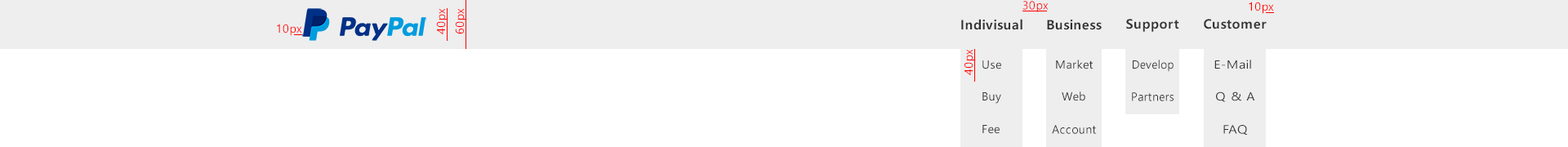
<style>
.page{position:relative;width:1568px;height:147px;background:#ffffff}
.page>*{position:absolute;margin:0}
.t1{font:11.4px "MalgunGothic";letter-spacing:0.03em;color:#ff0000}
.t2{font:13.1px "MalgunGothicBold";letter-spacing:0.03em;color:#333333}
.t3{font:11.4px "MalgunGothic";letter-spacing:0.03em;color:#333333}
.t4{font:11.4px "MalgunGothic";letter-spacing:0.03em;color:#333333;scale:1.13 1}
.t5{font:11.6px "MalgunGothic";letter-spacing:0.03em;color:#333333;scale:0.96 1}
.t6{font:11.6px "MalgunGothic";letter-spacing:0.03em;color:#333333}
.t7{font:11.6px "MalgunGothic";letter-spacing:0.03em;color:#333333;scale:1.12 1}
</style>
<div class="page">
<p class="t1" style="left:1022px;top:1px;width:27px;height:11px">30px</p>
<p class="t1" style="left:1249px;top:2px;width:25px;height:12px">10px</p>
<p class="t1" style="left:436px;top:8px;width:12px;height:26px;rotate:-90deg">40px</p>
<p class="t1" style="left:455px;top:8px;width:12px;height:26px;rotate:-90deg">60px</p>
<p class="t1" style="left:277px;top:24px;width:25px;height:12px">10px</p>
<p class="t2" style="left:961px;top:19px;width:61px;height:11px">Indivisual</p>
<p class="t2" style="left:1047px;top:20px;width:55px;height:10px">Business</p>
<p class="t2" style="left:1126px;top:19px;width:53px;height:13px">Support</p>
<p class="t2" style="left:1204px;top:19px;width:63px;height:10px">Customer</p>
<p class="t1" style="left:964px;top:49px;width:12px;height:26px;rotate:-90deg">40px</p>
<p class="t3" style="left:982px;top:60px;width:19px;height:9px">Use</p>
<p class="t3" style="left:1056px;top:60px;width:37px;height:9px">Market</p>
<p class="t3" style="left:1133px;top:60px;width:41px;height:12px">Develop</p>
<p class="t4" style="left:1214px;top:60px;width:37px;height:9px">E-Mail</p>
<p class="t3" style="left:982px;top:92px;width:19px;height:12px">Buy</p>
<p class="t3" style="left:1062px;top:91px;width:23px;height:10px">Web</p>
<p class="t5" style="left:1132px;top:92px;width:42px;height:9px">Partners</p>
<p class="t4" style="left:1216px;top:91px;width:39px;height:11px">Q &amp; A</p>
<p class="t3" style="left:982px;top:125px;width:18px;height:9px">Fee</p>
<p class="t6" style="left:1052px;top:125px;width:44px;height:9px">Account</p>
<p class="t7" style="left:1223px;top:125px;width:25px;height:10px">FAQ</p>
</div>
